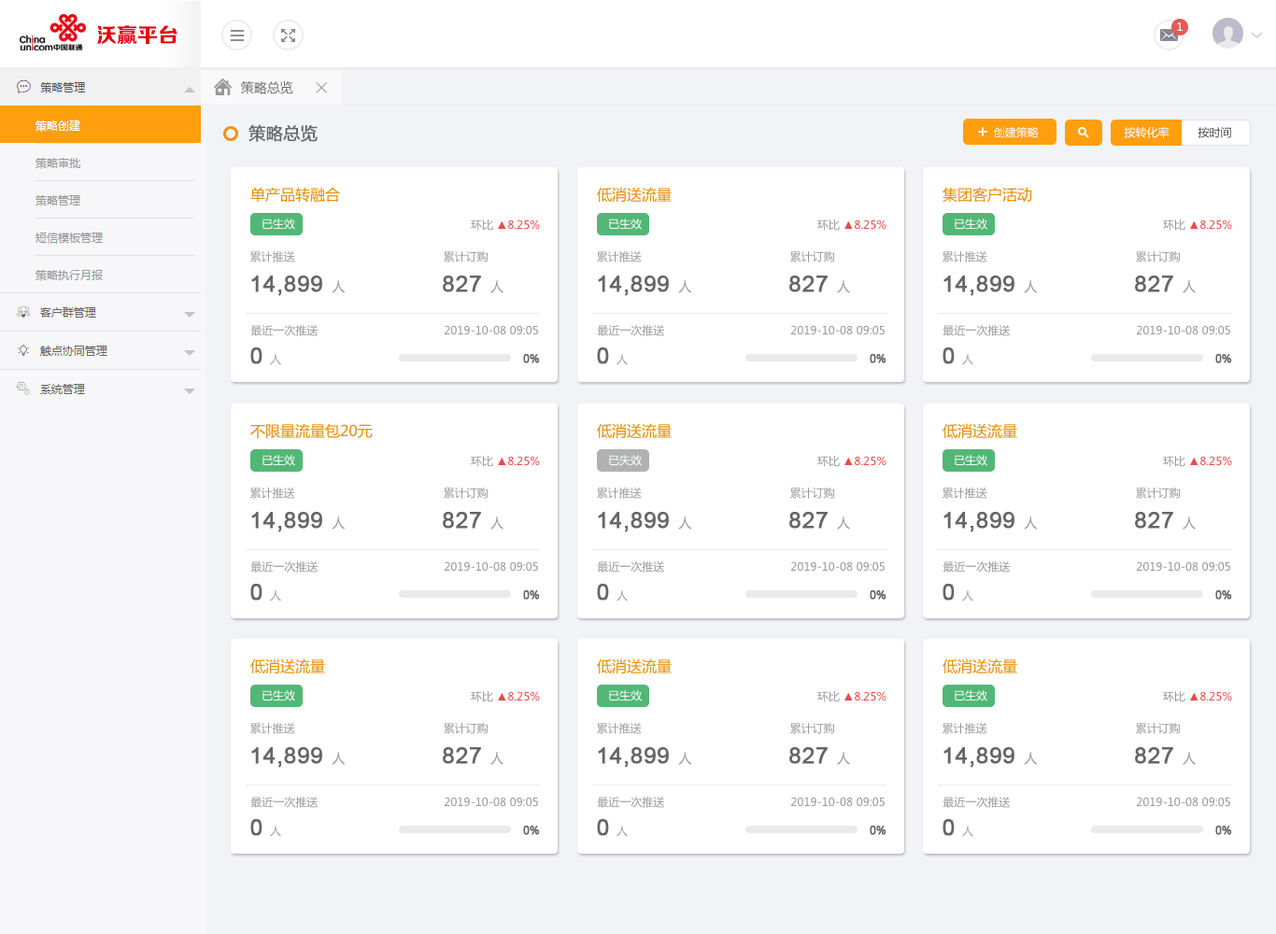
<style>
.page{position:relative;width:1276px;height:934px;background:#ffffff}
.page>*{position:absolute;margin:0}
.t1{font:20.6px "FZZDHJW--GB1-0";color:#e60013}
.t2{font:11.2px "MicrosoftYaHei";color:#ffffff}
.t3{font:13.1px "MicrosoftYaHei";color:#666666}
.t4{font:16.8px "MicrosoftYaHei";color:#666666;font-weight:bold}
.t5{font:11.2px "MicrosoftYaHei";color:#333333}
.t6{font:14.9px "MicrosoftYaHei";color:#e78b00}
.t7{font:11.2px "MicrosoftYaHei";color:#eb4a4a}
.t8{font:11.2px "MicrosoftYaHei";color:#999999}
.t9{font:22.4px "ArialMT";color:#666666;font-weight:bold}
.t10{font:13.1px "MicrosoftYaHei";color:#999999}
.t11{font:11.2px "ArialMT";color:#666666;font-weight:bold}
</style>
<div class="page">
<p class="t1" style="left:97px;top:25px;width:81px;height:20px">沃赢平台</p>
<p class="t2" style="left:1177px;top:22px;width:6px;height:9px">1</p>
<p class="t3" style="left:241px;top:81px;width:52px;height:13px">策略总览</p>
<p class="t4" style="left:249px;top:124px;width:69px;height:18px">策略总览</p>
<p class="t2" style="left:994px;top:127px;width:45px;height:11px">创建策略</p>
<p class="t2" style="left:1124px;top:126px;width:46px;height:12px">按转化率</p>
<p class="t5" style="left:1198px;top:127px;width:33px;height:11px">按时间</p>
<p class="t6" style="left:250px;top:187px;width:90px;height:16px">单产品转融合</p>
<p class="t6" style="left:597px;top:187px;width:75px;height:16px">低消送流量</p>
<p class="t6" style="left:943px;top:187px;width:89px;height:16px">集团客户活动</p>
<p class="t2" style="left:263px;top:219px;width:32px;height:11px">已生效</p>
<p class="t7" style="left:471px;top:220px;width:69px;height:11px"><span class="t8">环比 </span>▲8.25%</p>
<p class="t2" style="left:609px;top:219px;width:33px;height:11px">已生效</p>
<p class="t7" style="left:818px;top:220px;width:69px;height:11px"><span class="t8">环比 </span>▲8.25%</p>
<p class="t2" style="left:955px;top:219px;width:33px;height:11px">已生效</p>
<p class="t7" style="left:1163px;top:220px;width:69px;height:11px"><span class="t8">环比 </span>▲8.25%</p>
<p class="t8" style="left:250px;top:251px;width:45px;height:12px">累计推送</p>
<p class="t8" style="left:444px;top:251px;width:44px;height:12px">累计订购</p>
<p class="t8" style="left:597px;top:251px;width:45px;height:12px">累计推送</p>
<p class="t8" style="left:790px;top:251px;width:44px;height:12px">累计订购</p>
<p class="t8" style="left:943px;top:251px;width:45px;height:12px">累计推送</p>
<p class="t8" style="left:1136px;top:251px;width:44px;height:12px">累计订购</p>
<p class="t9" style="left:251px;top:276px;width:94px;height:20px">14,899 <span class="t10">人</span></p>
<p class="t9" style="left:443px;top:276px;width:61px;height:17px">827 <span class="t10">人</span></p>
<p class="t9" style="left:598px;top:276px;width:93px;height:20px">14,899 <span class="t10">人</span></p>
<p class="t9" style="left:789px;top:276px;width:61px;height:17px">827 <span class="t10">人</span></p>
<p class="t9" style="left:944px;top:276px;width:93px;height:20px">14,899 <span class="t10">人</span></p>
<p class="t9" style="left:1135px;top:276px;width:61px;height:17px">827 <span class="t10">人</span></p>
<p class="t8" style="left:250px;top:325px;width:68px;height:11px">最近一次推送</p>
<p class="t8" style="left:444px;top:325px;width:94px;height:10px">2019-10-08 09:05</p>
<p class="t8" style="left:597px;top:325px;width:67px;height:11px">最近一次推送</p>
<p class="t8" style="left:790px;top:325px;width:95px;height:10px">2019-10-08 09:05</p>
<p class="t8" style="left:943px;top:325px;width:67px;height:11px">最近一次推送</p>
<p class="t8" style="left:1136px;top:325px;width:94px;height:10px">2019-10-08 09:05</p>
<p class="t9" style="left:250px;top:348px;width:31px;height:17px">0<span class="t8">  人</span></p>
<p class="t9" style="left:597px;top:348px;width:31px;height:17px">0<span class="t8">  人</span></p>
<p class="t9" style="left:943px;top:348px;width:31px;height:17px">0<span class="t8">  人</span></p>
<p class="t11" style="left:523px;top:354px;width:17px;height:9px">0%</p>
<p class="t11" style="left:870px;top:354px;width:17px;height:9px">0%</p>
<p class="t11" style="left:1216px;top:354px;width:16px;height:9px">0%</p>
<p class="t6" style="left:250px;top:423px;width:123px;height:16px">不限量流量包20元</p>
<p class="t6" style="left:597px;top:423px;width:75px;height:16px">低消送流量</p>
<p class="t6" style="left:943px;top:423px;width:74px;height:16px">低消送流量</p>
<p class="t2" style="left:263px;top:455px;width:32px;height:11px">已生效</p>
<p class="t7" style="left:471px;top:456px;width:69px;height:11px"><span class="t8">环比 </span>▲8.25%</p>
<p class="t2" style="left:609px;top:455px;width:33px;height:11px">已失效</p>
<p class="t7" style="left:818px;top:456px;width:69px;height:11px"><span class="t8">环比 </span>▲8.25%</p>
<p class="t2" style="left:955px;top:455px;width:33px;height:11px">已生效</p>
<p class="t7" style="left:1163px;top:456px;width:69px;height:11px"><span class="t8">环比 </span>▲8.25%</p>
<p class="t8" style="left:250px;top:488px;width:45px;height:11px">累计推送</p>
<p class="t8" style="left:444px;top:488px;width:44px;height:11px">累计订购</p>
<p class="t8" style="left:597px;top:488px;width:45px;height:11px">累计推送</p>
<p class="t8" style="left:790px;top:488px;width:44px;height:11px">累计订购</p>
<p class="t8" style="left:943px;top:488px;width:45px;height:11px">累计推送</p>
<p class="t8" style="left:1136px;top:488px;width:44px;height:11px">累计订购</p>
<p class="t9" style="left:251px;top:512px;width:94px;height:21px">14,899 <span class="t10">人</span></p>
<p class="t9" style="left:443px;top:512px;width:61px;height:18px">827 <span class="t10">人</span></p>
<p class="t9" style="left:598px;top:512px;width:93px;height:21px">14,899 <span class="t10">人</span></p>
<p class="t9" style="left:789px;top:512px;width:61px;height:18px">827 <span class="t10">人</span></p>
<p class="t9" style="left:944px;top:512px;width:93px;height:21px">14,899 <span class="t10">人</span></p>
<p class="t9" style="left:1135px;top:512px;width:61px;height:18px">827 <span class="t10">人</span></p>
<p class="t8" style="left:250px;top:562px;width:68px;height:11px">最近一次推送</p>
<p class="t8" style="left:444px;top:562px;width:94px;height:10px">2019-10-08 09:05</p>
<p class="t8" style="left:597px;top:562px;width:67px;height:11px">最近一次推送</p>
<p class="t8" style="left:790px;top:562px;width:95px;height:10px">2019-10-08 09:05</p>
<p class="t8" style="left:943px;top:562px;width:67px;height:11px">最近一次推送</p>
<p class="t8" style="left:1136px;top:562px;width:94px;height:10px">2019-10-08 09:05</p>
<p class="t9" style="left:250px;top:584px;width:31px;height:18px">0<span class="t8">  人</span></p>
<p class="t11" style="left:523px;top:590px;width:17px;height:10px">0%</p>
<p class="t9" style="left:597px;top:584px;width:31px;height:18px">0<span class="t8">  人</span></p>
<p class="t11" style="left:870px;top:590px;width:17px;height:10px">0%</p>
<p class="t9" style="left:943px;top:584px;width:31px;height:18px">0<span class="t8">  人</span></p>
<p class="t11" style="left:1216px;top:590px;width:16px;height:10px">0%</p>
<p class="t6" style="left:250px;top:659px;width:75px;height:16px">低消送流量</p>
<p class="t6" style="left:597px;top:659px;width:75px;height:16px">低消送流量</p>
<p class="t6" style="left:943px;top:659px;width:74px;height:16px">低消送流量</p>
<p class="t2" style="left:263px;top:690px;width:32px;height:12px">已生效</p>
<p class="t7" style="left:471px;top:691px;width:69px;height:12px"><span class="t8">环比 </span>▲8.25%</p>
<p class="t2" style="left:609px;top:690px;width:33px;height:12px">已生效</p>
<p class="t7" style="left:818px;top:691px;width:69px;height:12px"><span class="t8">环比 </span>▲8.25%</p>
<p class="t2" style="left:955px;top:690px;width:33px;height:12px">已生效</p>
<p class="t7" style="left:1163px;top:691px;width:69px;height:12px"><span class="t8">环比 </span>▲8.25%</p>
<p class="t8" style="left:250px;top:723px;width:45px;height:11px">累计推送</p>
<p class="t8" style="left:444px;top:723px;width:44px;height:11px">累计订购</p>
<p class="t8" style="left:597px;top:723px;width:45px;height:11px">累计推送</p>
<p class="t8" style="left:790px;top:723px;width:44px;height:11px">累计订购</p>
<p class="t8" style="left:943px;top:723px;width:45px;height:11px">累计推送</p>
<p class="t8" style="left:1136px;top:723px;width:44px;height:11px">累计订购</p>
<p class="t9" style="left:251px;top:747px;width:94px;height:21px">14,899 <span class="t10">人</span></p>
<p class="t9" style="left:443px;top:747px;width:61px;height:18px">827 <span class="t10">人</span></p>
<p class="t9" style="left:598px;top:747px;width:93px;height:21px">14,899 <span class="t10">人</span></p>
<p class="t9" style="left:789px;top:747px;width:61px;height:18px">827 <span class="t10">人</span></p>
<p class="t9" style="left:944px;top:747px;width:93px;height:21px">14,899 <span class="t10">人</span></p>
<p class="t9" style="left:1135px;top:747px;width:61px;height:18px">827 <span class="t10">人</span></p>
<p class="t8" style="left:250px;top:797px;width:68px;height:11px">最近一次推送</p>
<p class="t8" style="left:444px;top:797px;width:94px;height:10px">2019-10-08 09:05</p>
<p class="t8" style="left:597px;top:797px;width:67px;height:11px">最近一次推送</p>
<p class="t8" style="left:790px;top:797px;width:95px;height:10px">2019-10-08 09:05</p>
<p class="t8" style="left:943px;top:797px;width:67px;height:11px">最近一次推送</p>
<p class="t8" style="left:1136px;top:797px;width:94px;height:10px">2019-10-08 09:05</p>
<p class="t9" style="left:250px;top:819px;width:31px;height:18px">0<span class="t8">  人</span></p>
<p class="t9" style="left:597px;top:819px;width:31px;height:18px">0<span class="t8">  人</span></p>
<p class="t9" style="left:943px;top:819px;width:31px;height:18px">0<span class="t8">  人</span></p>
<p class="t11" style="left:523px;top:826px;width:17px;height:9px">0%</p>
<p class="t11" style="left:870px;top:826px;width:17px;height:9px">0%</p>
<p class="t11" style="left:1216px;top:826px;width:16px;height:9px">0%</p>
</div>
